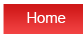
<style>
.page{position:relative;width:83px;height:40px;background:#ffffff}
.page>*{position:absolute;margin:0}
.t1{font:14.7px "ArialMT";color:#ffffff}
</style>
<div class="page">
<p class="t1" style="left:27px;top:12px;width:39px;height:11px">Home</p>
</div>
